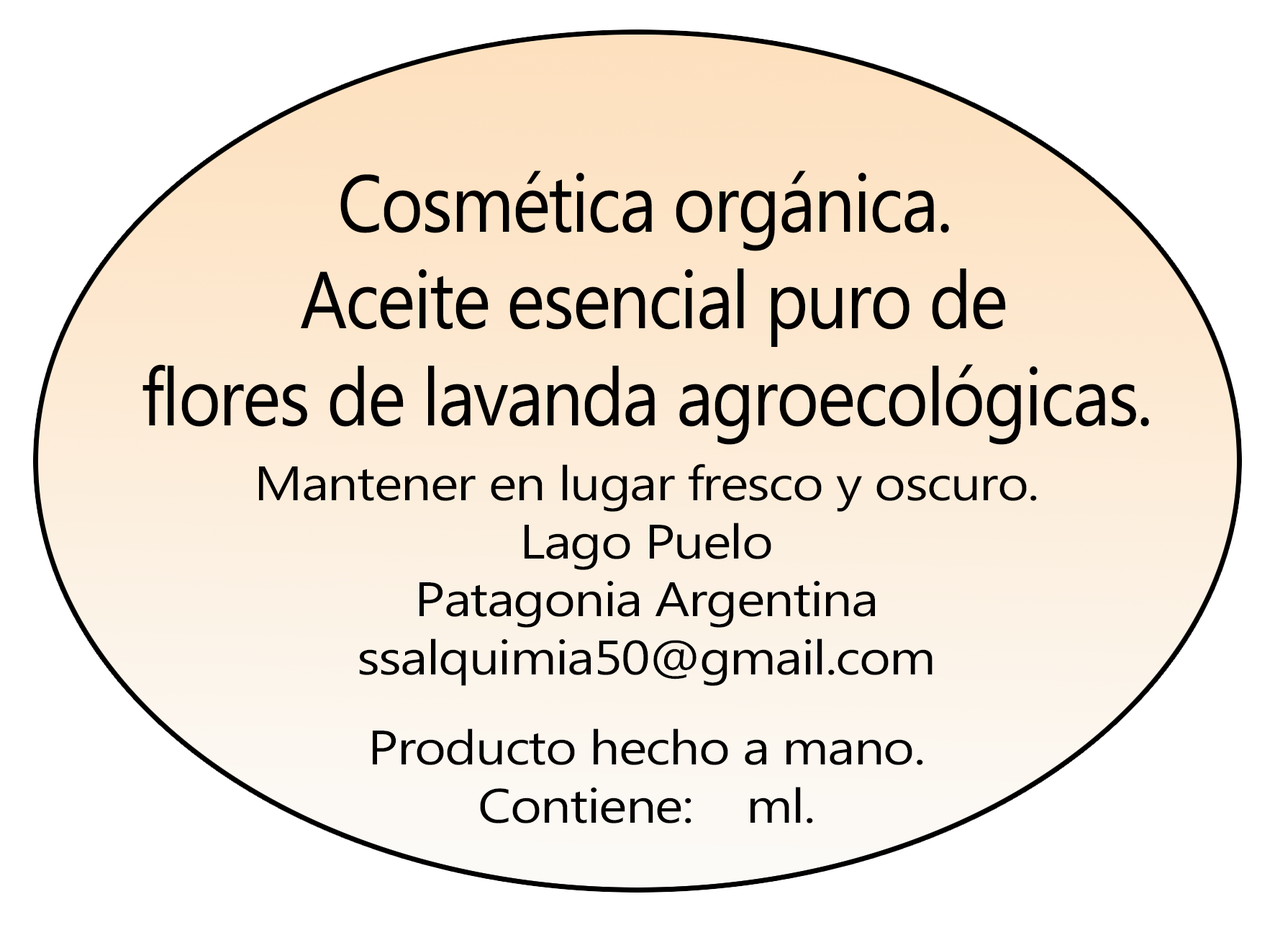
<style>
.page{position:relative;width:1275px;height:935px;background:#ffffff}
.page>*{position:absolute;margin:0}
.t1{font:80.5px "MicrosoftPhagsPa";letter-spacing:-0.025em;color:#020000;scale:0.91 1}
.t2{font:48.3px "MicrosoftPhagsPa";letter-spacing:-0.025em;color:#020000;scale:1.12 1}
</style>
<div class="page">
<p class="t1" style="left:143px;top:171px;width:1006px;height:274px;text-align:center">Cosmética orgánica. <br>Aceite esencial puro de<br>flores de lavanda agroecológicas.</p>
<p class="t2" style="left:259px;top:464px;width:778px;height:359px;text-align:center">Mantener en lugar fresco y oscuro.<br>Lago Puelo<br>Patagonia Argentina<br>ssalquimia50@gmail.com<br><br>Producto hecho a mano.<br>Contiene:    ml.</p>
</div>
